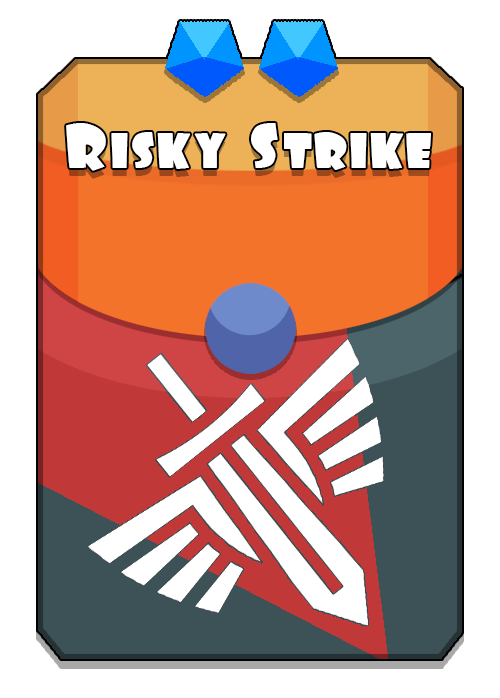
<style>
.page{position:relative;width:500px;height:698px;background:#ffffff}
.page>*{position:absolute;margin:0}
.t1{font:56px "Foo";color:#ffffff}
</style>
<div class="page">
<p class="t1" style="left:66px;top:123px;width:365px;height:48px">Risky Strike</p>
</div>
